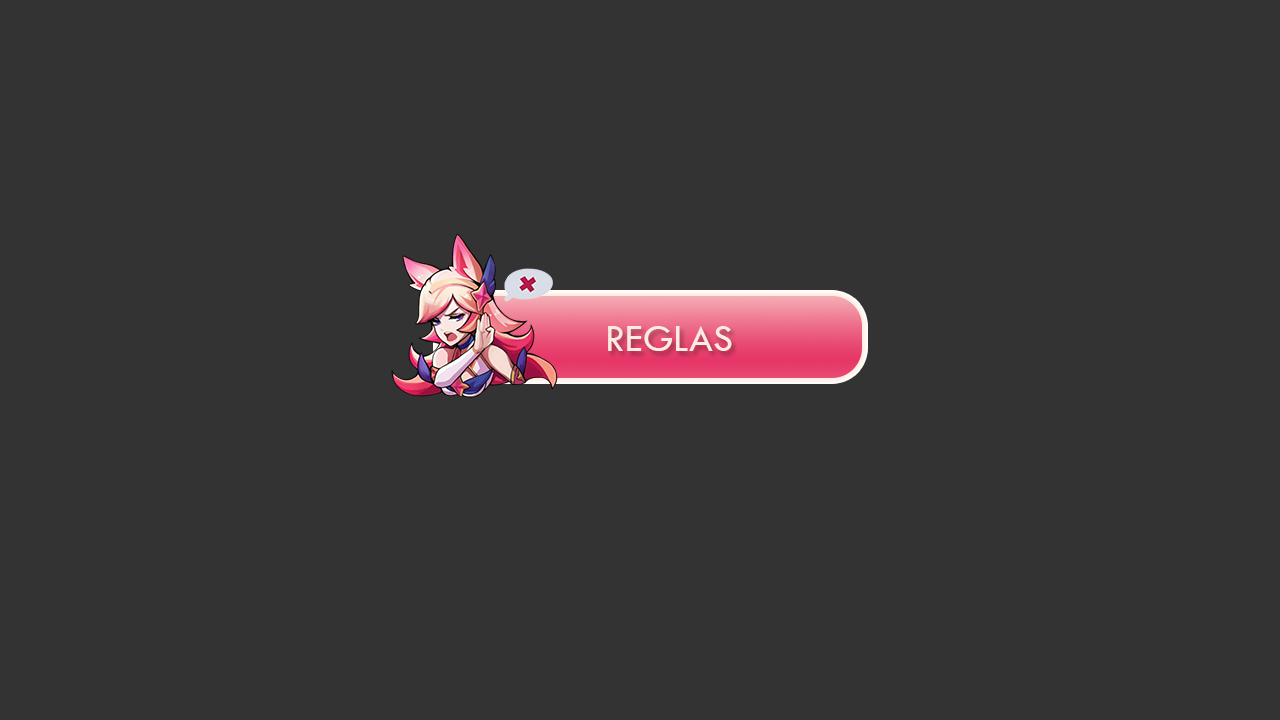
<style>
.page{position:relative;width:1280px;height:720px;background:#333333}
.page>*{position:absolute;margin:0}
.t1{font:40px "TwCenMT-Regular";color:#fdecdf}
</style>
<div class="page">
<p class="t1" style="left:608px;top:326px;width:124px;height:25px">REGLAS</p>
</div>
